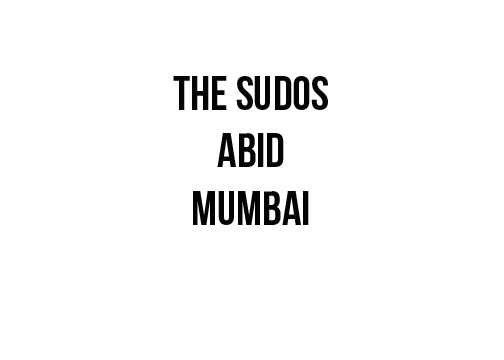
<style>
.page{position:relative;width:504px;height:360px;background:#ffffff}
.page>*{position:absolute;margin:0}
.t1{font:48px "BebasNeueBold";color:#040404}
</style>
<div class="page">
<p class="t1" style="left:173px;top:76px;width:155px;height:149px;text-align:center">The sudos<br>abid<br>mumbai</p>
</div>
